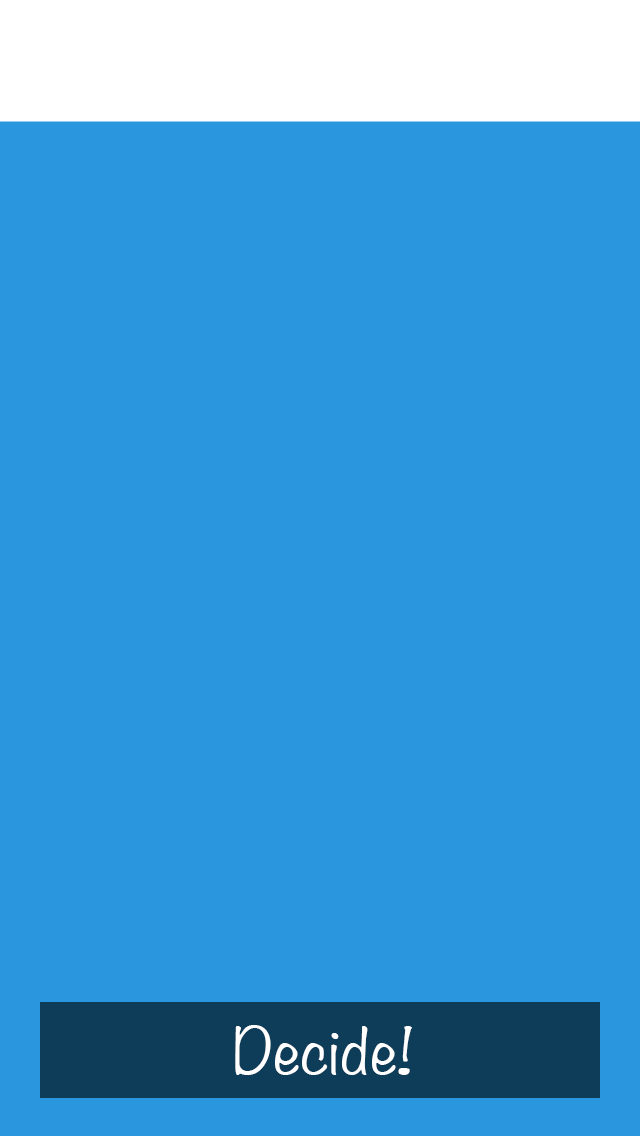
<style>
.page{position:relative;width:640px;height:1136px;background:#2996dd}
.page>*{position:absolute;margin:0}
.t1{font:56.5px "Noteworthy-Light";color:#ffffff;scale:1.13 1}
</style>
<div class="page">
<p class="t1" style="left:235px;top:1025px;width:177px;height:50px">Decide!</p>
</div>
